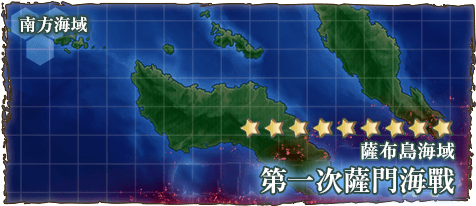
<style>
.page{position:relative;width:476px;height:206px}
.page>*{position:absolute;margin:0}
.t1{font:17px "RyuminPr6N-ExBold";color:#ffffff}
.t2{font:19px "RyuminPro-ExBold";color:#ffffff}
.t3{font:28px "RyuminPro-ExBold";color:#ffffff}
</style>
<div class="page">
<p class="t1" style="left:19px;top:16px;width:68px;height:17px">南方海域</p>
<p class="t2" style="left:361px;top:141px;width:94px;height:19px">薩布島海域</p>
<p class="t3" style="left:260px;top:167px;width:195px;height:27px">第一次薩門海戰</p>
</div>
